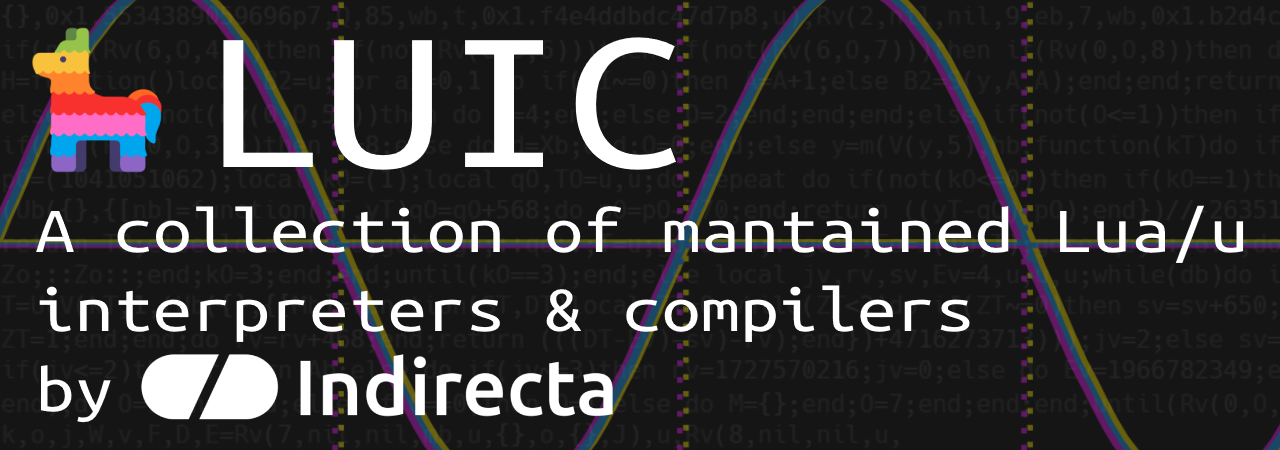
<style>
.page{position:relative;width:1280px;height:450px;background:#151515}
.page>*{position:absolute;margin:0}
.t1{font:204.9px "UbuntuMono-Regular";color:#ffffff;scale:1.18 1}
.t2{font:66.2px "UbuntuMono-Regular";color:#ffffff;scale:1.18 1}
</style>
<div class="page">
<p class="t1" style="left:223px;top:37px;width:453px;height:133px">LUIC</p>
<p class="t2" style="left:36px;top:205px;width:1208px;height:218px">A collection of mantained Lua/u<br>interpreters &amp; compilers <br>by</p>
</div>
